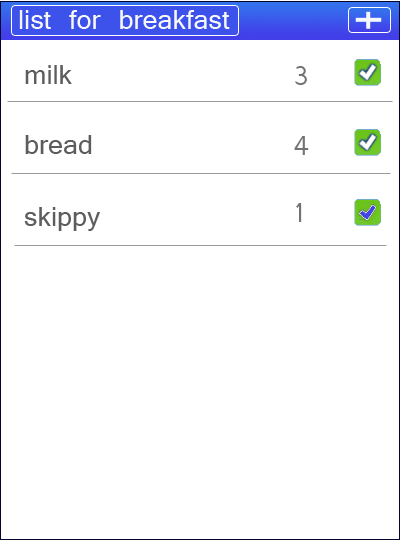
<style>
.page{position:relative;width:400px;height:540px;background:#ffffff}
.page>*{position:absolute;margin:0}
.t1{font:30px "Vrinda";color:#f6f7fa}
.t2{font:30px "Vrinda";color:#5d5d5d}
.t3{font:30px "Vrinda";color:#737373}
</style>
<div class="page">
<p class="t1" style="left:19px;top:10px;width:211px;height:19px">list for breakfast</p>
<p class="t2" style="left:25px;top:65px;width:47px;height:19px">milk</p>
<p class="t3" style="left:295px;top:66px;width:12px;height:19px">3</p>
<p class="t2" style="left:25px;top:135px;width:67px;height:19px">bread</p>
<p class="t3" style="left:294px;top:136px;width:15px;height:19px">4</p>
<p class="t2" style="left:24px;top:207px;width:76px;height:24px">skippy</p>
<p class="t3" style="left:296px;top:203px;width:6px;height:19px">1</p>
</div>
